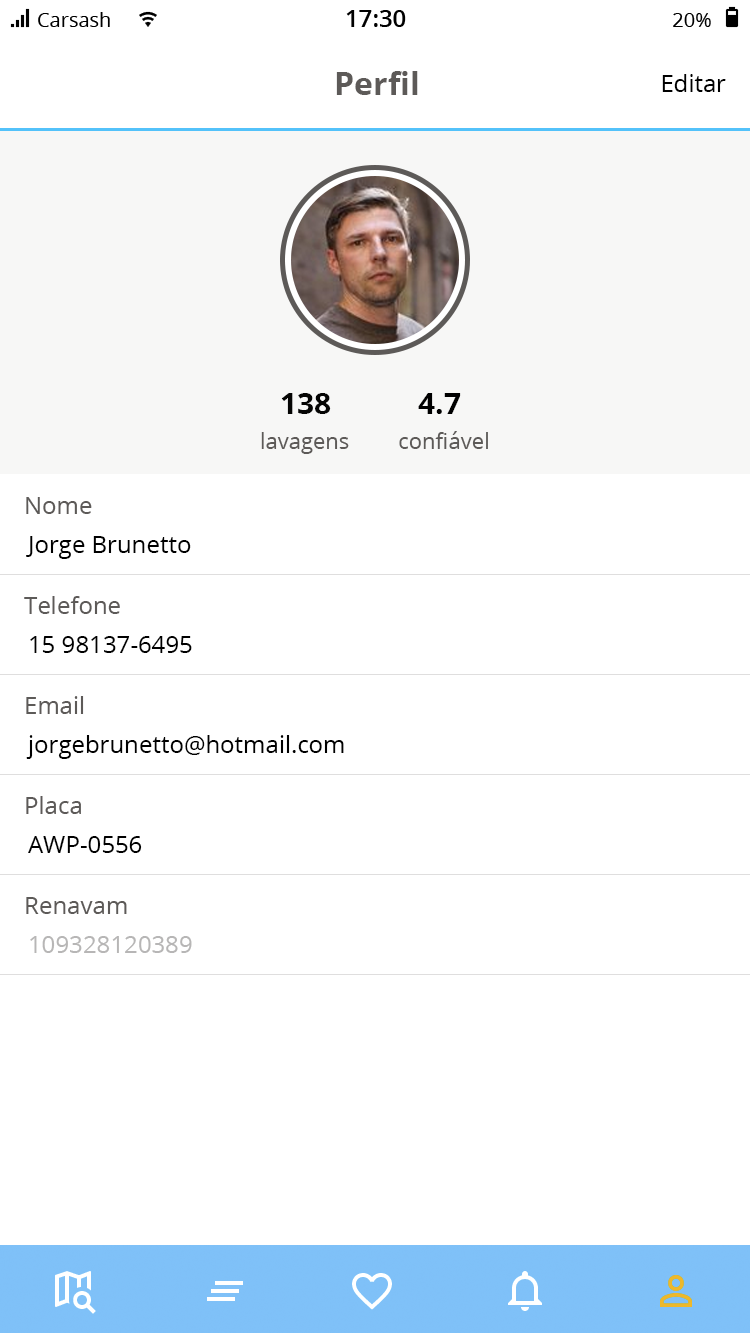
<style>
.page{position:relative;width:750px;height:1334px;background:#ffffff}
.page>*{position:absolute;margin:0}
.t1{font:32px "OpenSans-Bold";color:#5d5a58}
.t2{font:24px "OpenSans";color:#000000}
.t3{font:30px "OpenSans-Bold";color:#000000}
.t4{font:22px "OpenSans";color:#5d5a58}
.t5{font:24px "OpenSans";color:#5d5a58}
.t6{font:24px "OpenSans";color:#b7b6b6}
</style>
<div class="page">
<p class="t1" style="left:336px;top:71px;width:82px;height:24px">Perfil</p>
<p class="t2" style="left:662px;top:74px;width:64px;height:18px">Editar</p>
<p class="t3" style="left:281px;top:393px;width:50px;height:21px">138</p>
<p class="t3" style="left:418px;top:393px;width:43px;height:21px">4.7</p>
<p class="t4" style="left:261px;top:432px;width:88px;height:22px">lavagens</p>
<p class="t4" style="left:399px;top:431px;width:89px;height:18px">confiável</p>
<p class="t5" style="left:26px;top:497px;width:66px;height:17px">Nome</p>
<p class="t2" style="left:26px;top:536px;width:165px;height:23px">Jorge Brunetto</p>
<p class="t5" style="left:24px;top:596px;width:96px;height:18px">Telefone</p>
<p class="t2" style="left:30px;top:636px;width:162px;height:17px">15 98137-6495</p>
<p class="t5" style="left:26px;top:696px;width:58px;height:18px">Email</p>
<p class="t2" style="left:26px;top:735px;width:318px;height:24px">jorgebrunetto@hotmail.com</p>
<p class="t5" style="left:26px;top:796px;width:55px;height:18px">Placa</p>
<p class="t2" style="left:28px;top:836px;width:114px;height:17px">AWP-0556</p>
<p class="t5" style="left:26px;top:897px;width:101px;height:17px">Renavam</p>
<p class="t6" style="left:30px;top:936px;width:162px;height:17px">109328120389</p>
</div>
